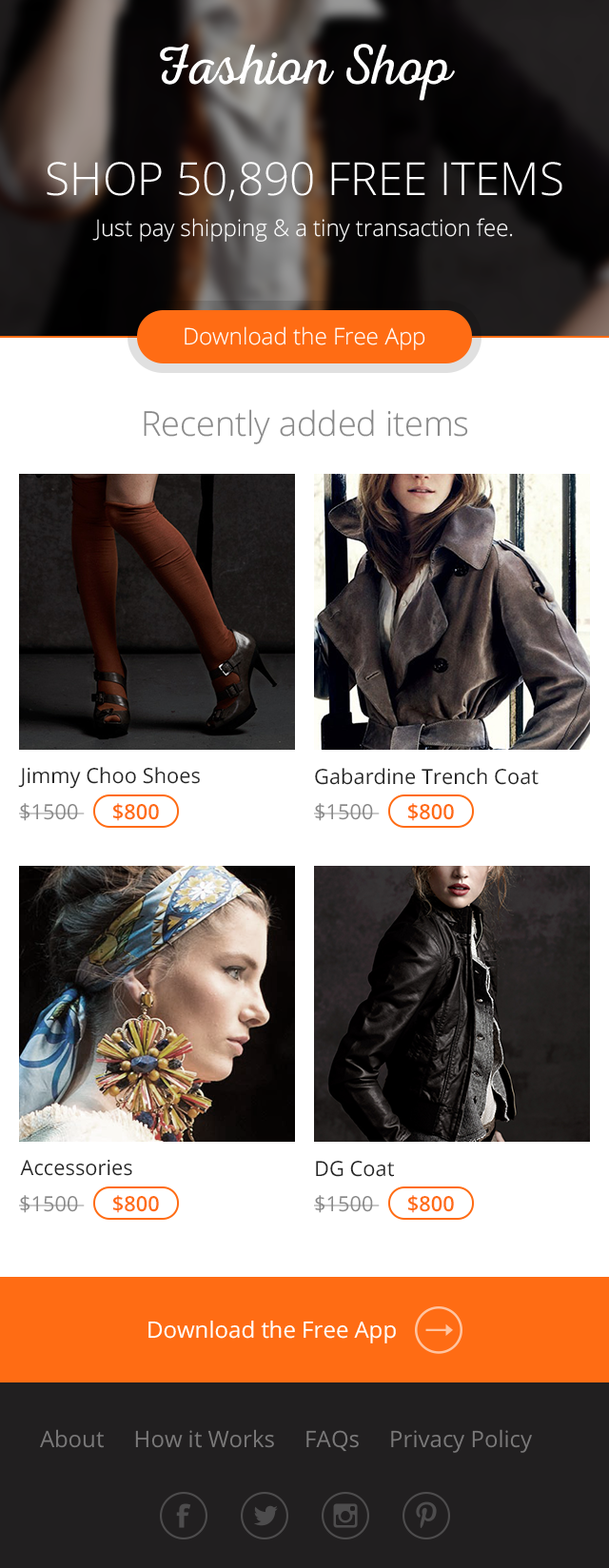
<style>
.page{position:relative;width:609px;height:1568px;background:#ffffff}
.page>*{position:absolute;margin:0}
.t1{font:57.1px "NexaRustScriptL-0";color:#ffffff}
.t2{font:45.7px "OpenSans-Light";color:#ffffff;text-transform:uppercase}
.t3{font:22.8px "OpenSans-Light";color:#ffffff}
.t4{font:34.3px "OpenSans-Light";color:#898989}
.t5{font:20.9px "OpenSans";color:#252525}
.t6{font:20.9px "OpenSans";color:#898989}
.t7{font:20.9px "OpenSans-Semibold";color:#ff6c14}
.t8{font:22.7px "OpenSans";color:#ffffff}
.t9{font:22.8px "OpenSans";color:#7a7979}
</style>
<div class="page">
<p class="t1" style="left:160px;top:44px;width:295px;height:57px">Fashion Shop</p>
<p class="t2" style="left:47px;top:162px;width:515px;height:40px">Shop 50,890 free items</p>
<p class="t3" style="left:92px;top:218px;width:421px;height:24px">Just pay shipping &amp; a tiny transaction fee.</p>
<p class="t3" style="left:185px;top:326px;width:240px;height:24px">Download the Free App</p>
<p class="t4" style="left:144px;top:409px;width:324px;height:35px">Recently added items</p>
<p class="t5" style="left:18px;top:767px;width:182px;height:22px">Jimmy Choo Shoes</p>
<p class="t5" style="left:315px;top:768px;width:224px;height:17px">Gabardine Trench Coat</p>
<p class="t6" style="left:19px;top:803px;width:66px;height:18px">$1500</p>
<p class="t7" style="left:113px;top:803px;width:46px;height:18px">$800</p>
<p class="t6" style="left:314px;top:803px;width:66px;height:18px">$1500</p>
<p class="t7" style="left:408px;top:803px;width:46px;height:18px">$800</p>
<p class="t5" style="left:20px;top:1159px;width:112px;height:17px">Accessories</p>
<p class="t5" style="left:316px;top:1161px;width:78px;height:16px">DG Coat</p>
<p class="t6" style="left:19px;top:1195px;width:66px;height:18px">$1500</p>
<p class="t7" style="left:113px;top:1195px;width:46px;height:18px">$800</p>
<p class="t6" style="left:314px;top:1195px;width:66px;height:18px">$1500</p>
<p class="t7" style="left:408px;top:1195px;width:46px;height:18px">$800</p>
<p class="t8" style="left:148px;top:1320px;width:248px;height:23px">Download the Free App</p>
<p class="t9" style="left:40px;top:1429px;width:492px;height:24px">About     How it Works     FAQs     Privacy Policy</p>
</div>
